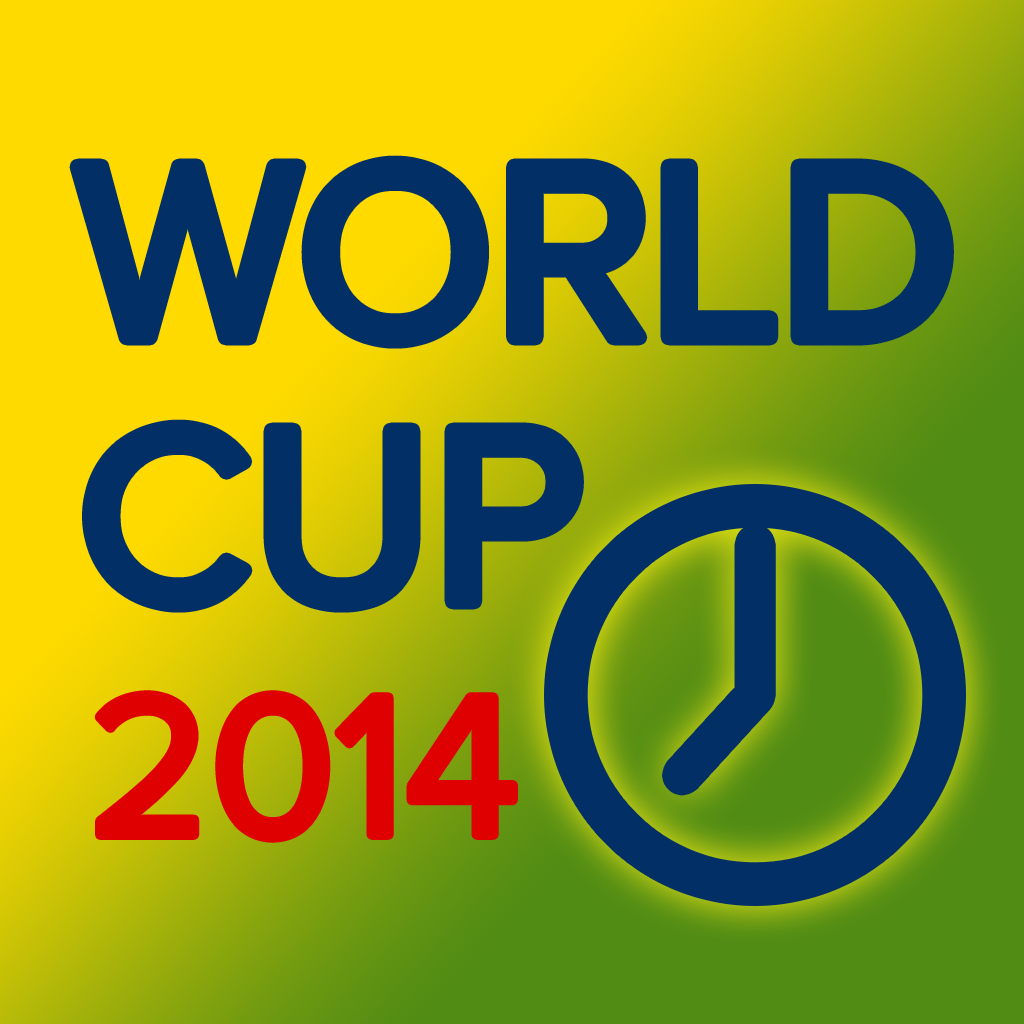
<style>
.page{position:relative;width:1024px;height:1024px}
.page>*{position:absolute;margin:0}
.t1{font:256px "ProximaNova-Regular";color:#022f65}
.t2{font:206.2px "ProximaNova-Regular";color:#df0102}
</style>
<div class="page">
<p class="t1" style="left:77px;top:163px;width:869px;height:178px">WORLD</p>
<p class="t1" style="left:90px;top:427px;width:486px;height:178px">CUP</p>
<p class="t2" style="left:99px;top:695px;width:414px;height:143px">2014</p>
</div>
